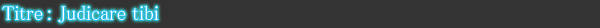
<style>
.page{position:relative;width:600px;height:28px;background:#333333}
.page>*{position:absolute;margin:0}
.t1{font:20px "MS-PMincho";color:#ffffff}
</style>
<div class="page">
<p class="t1" style="left:2px;top:5px;width:157px;height:18px">Titre : Judicare tibi</p>
</div>
